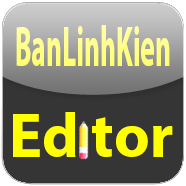
<style>
.page{position:relative;width:186px;height:186px;background:#353535}
.page>*{position:absolute;margin:0}
.t1{font:57px "MyriadPro-Bold";color:#ffff84;scale:0.48 1}
.t2{font:62px "MyriadPro-Bold";color:#ffff00}
</style>
<div class="page">
<p class="t1" style="left:16px;top:25px;width:154px;height:41px">BanLinhKien</p>
<p class="t2" style="left:13px;top:112px;width:160px;height:45px">Ed tor</p>
</div>
